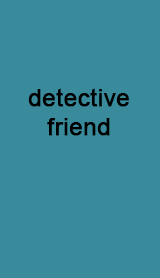
<style>
.page{position:relative;width:160px;height:278px;background:#398a9a}
.page>*{position:absolute;margin:0}
.t1{font:24px "ArialMT";color:#000000;font-weight:bold}
</style>
<div class="page">
<p class="t1" style="left:28px;top:88px;width:101px;height:48px;text-align:center">detective<br>friend</p>
</div>
